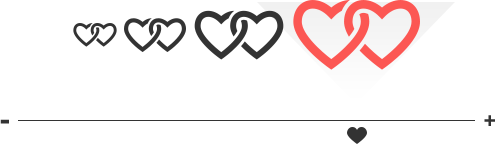
<style>
.page{position:relative;width:495px;height:144px;background:#ffffff}
.page>*{position:absolute;margin:0}
.t1{font:30px "Helvetica-Bold";letter-spacing:0.05em;color:#333333}
.t2{font:20px "Helvetica-Bold";letter-spacing:0.05em;color:#333333}
</style>
<div class="page">
<p class="t1" style="left:0px;top:119px;width:9px;height:5px">-</p>
<p class="t2" style="left:484px;top:115px;width:11px;height:11px">+</p>
</div>
